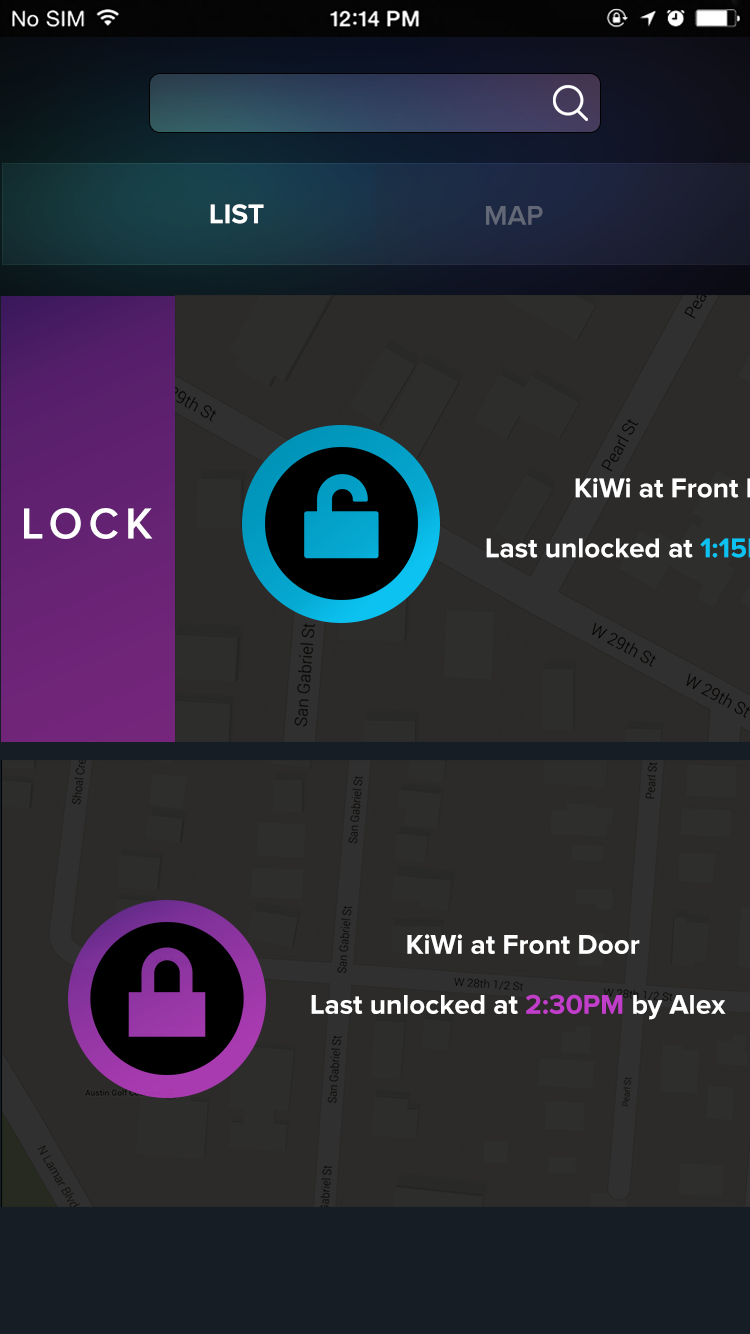
<style>
.page{position:relative;width:750px;height:1334px;background:#2c2b29}
.page>*{position:absolute;margin:0}
.t1{font:28px "ProximaNova-Bold";color:#ffffff}
.t2{font:28px "ProximaNova-Semibold";color:#636876}
.t3{font:44.9px "ProximaNova-Semibold";letter-spacing:0.14em;color:#ffffff}
.t4{font:28px "ProximaNova-Bold";color:#c13eca}
</style>
<div class="page">
<p class="t1" style="left:210px;top:204px;width:54px;height:20px">LIST</p>
<p class="t2" style="left:486px;top:206px;width:57px;height:19px">MAP</p>
<p class="t3" style="left:24px;top:508px;width:129px;height:31px">LOCK</p>
<p class="t1" style="left:407px;top:934px;width:233px;height:20px">KiWi at Front Door</p>
<p class="t1" style="left:311px;top:994px;width:415px;height:26px">Last unlocked at <span class="t4">2:30PM </span>by Alex</p>
</div>
